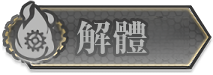
<style>
.page{position:relative;width:213px;height:75px}
.page>*{position:absolute;margin:0}
.t1{font:36px "RyuminPr6N-ExBold";color:#b6b7b6}
</style>
<div class="page">
<p class="t1" style="left:77px;top:20px;width:70px;height:34px">解體</p>
</div>
